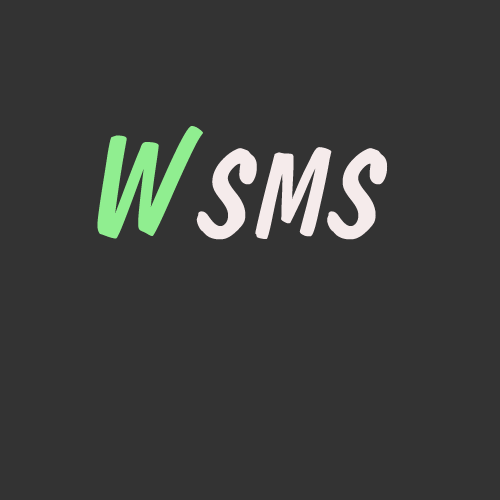
<style>
.page{position:relative;width:500px;height:500px;background:#333333}
.page>*{position:absolute;margin:0}
.t1{font:150px "DomDiagonalBT-Regular";letter-spacing:0.005em;color:#90ee90}
.t2{font:125px "DomDiagonalBT-Regular";letter-spacing:0.005em;color:#f5ebeb}
</style>
<div class="page">
<p class="t1" style="left:97px;top:126px;width:106px;height:113px">W</p>
<p class="t2" style="left:196px;top:147px;width:192px;height:93px">SMS</p>
</div>
